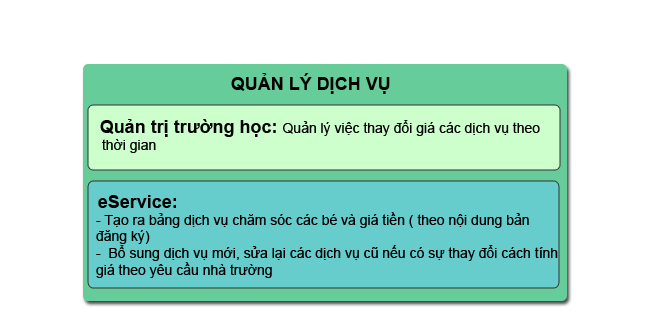
<style>
.page{position:relative;width:663px;height:314px;background:#ffffff}
.page>*{position:absolute;margin:0}
.t1{font:18px "Arial-BoldMT";color:#000000}
.t2{font:14px "ArialMT";color:#000000}
</style>
<div class="page">
<p class="t1" style="left:231px;top:73px;width:159px;height:21px">QUẢN LÝ DỊCH VỤ</p>
<p class="t2" style="left:100px;top:119px;width:440px;height:34px"><span class="t1">Quản trị trường học: </span>Quản lý việc thay đổi giá các dịch vụ theo<br> thời gian</p>
<p class="t2" style="left:96px;top:195px;width:462px;height:83px"><span class="t1">eService: <br></span>- Tạo ra bảng dịch vụ chăm sóc các bé và giá tiền ( theo nội dung bản <br>đăng ký)<br>-  Bổ sung dịch vụ mới, sửa lại các dịch vụ cũ nếu có sự thay đổi cách tính giá theo yêu cầu nhà trường</p>
</div>
